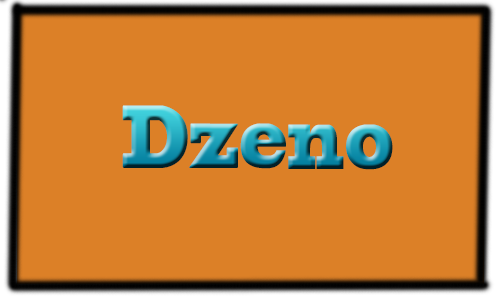
<style>
.page{position:relative;width:500px;height:300px;background:#dc8027}
.page>*{position:absolute;margin:0}
.t1{font:83.3px "BlackoakStd";scale:0.44 1}
</style>
<div class="page">
<p class="t1" style="left:122px;top:105px;width:271px;height:65px">Dzeno</p>
</div>
